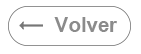
<style>
.page{position:relative;width:141px;height:54px;background:#ffffff}
.page>*{position:absolute;margin:0}
.t1{font:21.2px "ArialNarrow-Bold";color:#8b8b8b;scale:1.18 1}
</style>
<div class="page">
<p class="t1" style="left:54px;top:17px;width:63px;height:15px">Volver</p>
</div>
